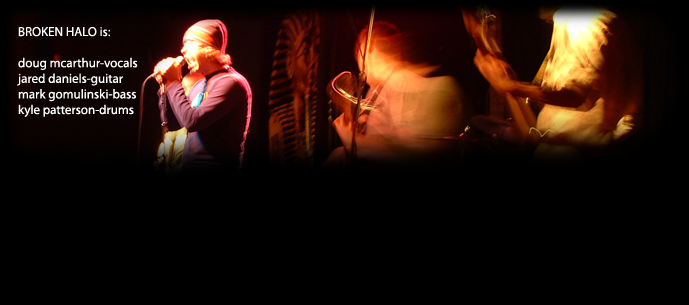
<style>
.page{position:relative;width:689px;height:305px;background:#000000}
.page>*{position:absolute;margin:0}
.t1{font:13px "Myriad-Roman";color:#ffffff}
</style>
<div class="page">
<p class="t1" style="left:17px;top:27px;width:121px;height:90px;text-align:justify">BROKEN HALO is:<br><br>doug mcarthur-vocals<br>jared daniels-guitar<br>mark gomulinski-bass<br>kyle patterson-drums</p>
</div>
